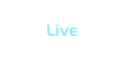
<style>
.page{position:relative;width:123px;height:60px;background:#ffffff}
.page>*{position:absolute;margin:0}
.t1{font:16px "AeroRegularSWFTE";color:#8bedff}
</style>
<div class="page">
<p class="t1" style="left:47px;top:24px;width:30px;height:12px">Live</p>
</div>
